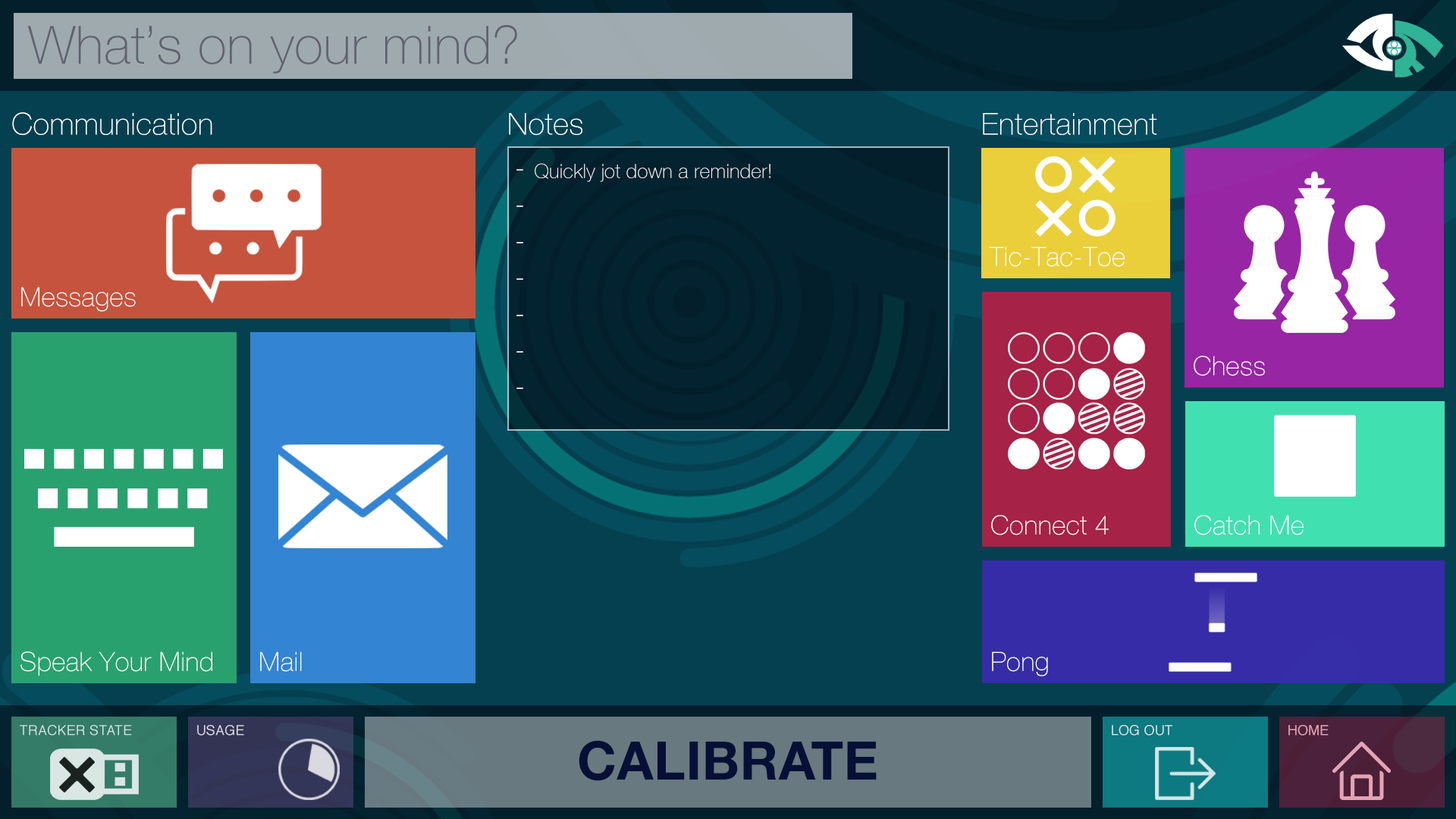
<style>
.page{position:relative;width:1456px;height:819px}
.page>*{position:absolute;margin:0}
.t1{font:53.1px "HelveNueThin";letter-spacing:0.01em;color:#60626e}
.t2{font:30.3px "HelveNueThin";letter-spacing:0.01em;color:#ffffff}
.t3{font:19.7px "HelveNueThin";letter-spacing:0.01em;color:#ffffff}
.t4{font:26.5px "HelveNueThin";letter-spacing:0.01em;color:#ffffff}
.t5{font:13.6px "Helvetica";letter-spacing:0.01em;color:#dddee3}
.t6{font:13.6px "Helvetica";letter-spacing:0.01em;color:#d9e8e9}
.t7{font:13.6px "Helvetica";letter-spacing:0.01em;color:#dfa1b2}
.t8{font:53.1px "HelveticaNeue-Bold";letter-spacing:0.01em;color:#061036}
</style>
<div class="page">
<p class="t1" style="left:27px;top:25px;width:490px;height:49px">What’s on your mind?</p>
<p class="t2" style="left:12px;top:112px;width:200px;height:23px">Communication</p>
<p class="t2" style="left:509px;top:113px;width:73px;height:22px">Notes</p>
<p class="t2" style="left:983px;top:113px;width:174px;height:22px">Entertainment</p>
<p class="t3" style="left:516px;top:163px;width:254px;height:226px;text-align:justify"><span class="t2">- </span>Quickly jot down a reminder!<br><span class="t2">-<br>-<br>-<br>-<br>-<br>-</span></p>
<p class="t4" style="left:989px;top:246px;width:136px;height:21px">Tic-Tac-Toe</p>
<p class="t4" style="left:21px;top:287px;width:115px;height:25px">Messages</p>
<p class="t4" style="left:1194px;top:356px;width:71px;height:20px">Chess</p>
<p class="t4" style="left:991px;top:515px;width:118px;height:20px">Connect 4</p>
<p class="t4" style="left:1194px;top:515px;width:110px;height:20px">Catch Me</p>
<p class="t4" style="left:20px;top:651px;width:192px;height:25px">Speak Your Mind</p>
<p class="t4" style="left:260px;top:651px;width:42px;height:21px">Mail</p>
<p class="t4" style="left:992px;top:651px;width:56px;height:25px">Pong</p>
<p class="t5" style="left:197px;top:725px;width:47px;height:11px">USAGE</p>
<p class="t6" style="left:1112px;top:725px;width:60px;height:11px">LOG OUT</p>
<p class="t7" style="left:1288px;top:725px;width:41px;height:11px">HOME</p>
<p class="t8" style="left:579px;top:740px;width:298px;height:41px">CALIBRATE</p>
</div>
